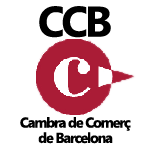
<style>
.page{position:relative;width:150px;height:150px;background:#ffffff}
.page>*{position:absolute;margin:0}
.t1{font:42.7px "SegoeUI-Bold";letter-spacing:-0.075em;color:#000000}
.t2{font:14.2px "SegoeUI-Bold";letter-spacing:-0.075em;color:#000000}
</style>
<div class="page">
<p class="t1" style="left:39px;top:6px;width:72px;height:32px">CCB</p>
<p class="t2" style="left:20px;top:117px;width:111px;height:14px">Cambra de Comerç</p>
<p class="t2" style="left:38px;top:132px;width:75px;height:12px">de Barcelona</p>
</div>
